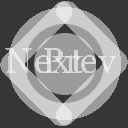
<style>
.page{position:relative;width:128px;height:128px;background:#363636}
.page>*{position:absolute;margin:0}
.t1{font:35.6px "Vani";letter-spacing:0.02em;color:#d7d7d7}
</style>
<div class="page">
<p class="t1" style="left:5px;top:48px;width:78px;height:25px">Next</p>
<p class="t1" style="left:44px;top:48px;width:72px;height:25px">Prev</p>
</div>
